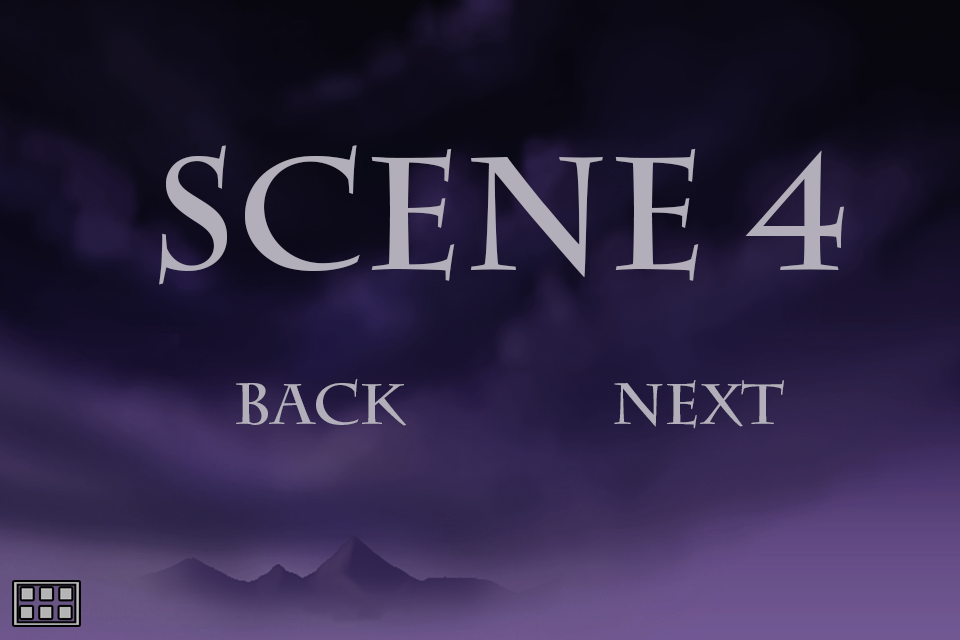
<style>
.page{position:relative;width:960px;height:640px}
.page>*{position:absolute;margin:0}
.t1{font:158px "CharlemagneStd-Bold";color:#b2afba}
.t2{font:57.7px "CharlemagneStd-Bold";color:#b2afba}
</style>
<div class="page">
<p class="t1" style="left:159px;top:145px;width:685px;height:140px">scene 4</p>
<p class="t2" style="left:236px;top:379px;width:170px;height:47px">back</p>
<p class="t2" style="left:614px;top:380px;width:170px;height:49px">Next</p>
</div>
